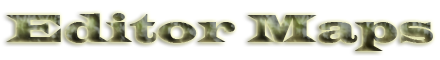
<style>
.page{position:relative;width:440px;height:60px;background:#ffffff}
.page>*{position:absolute;margin:0}
.t1{font:41px "LatinWide"}
</style>
<div class="page">
<p class="t1" style="left:6px;top:13px;width:427px;height:38px">Editor Maps</p>
</div>
